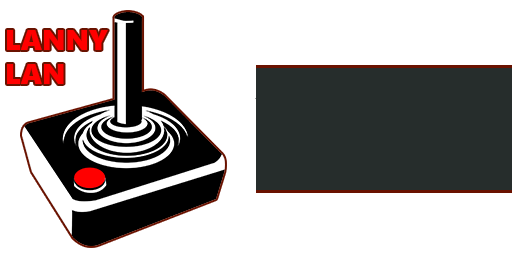
<style>
.page{position:relative;width:512px;height:256px;background:#ffffff}
.page>*{position:absolute;margin:0}
.t1{font:28.7px "SegoeUIBlack";color:#ff0000}
</style>
<div class="page">
<p class="t1" style="left:7px;top:30px;width:101px;height:54px">LANNY<br>LAN</p>
</div>
